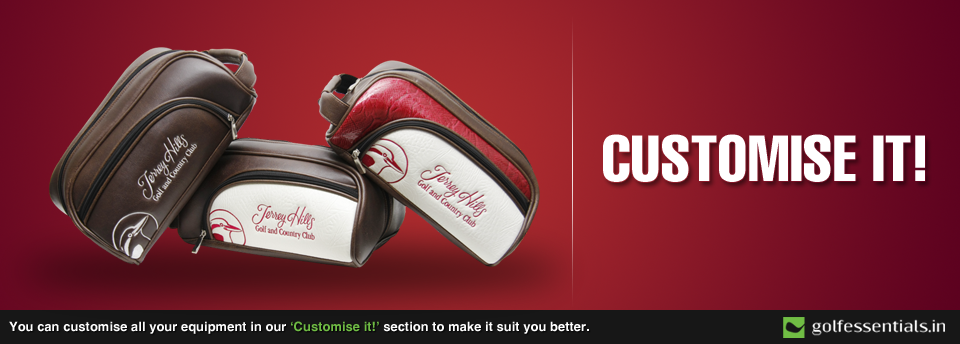
<style>
.page{position:relative;width:960px;height:344px}
.page>*{position:absolute;margin:0}
.t1{font:64px "HelveticaLT-Compressed";color:#ffffff}
.t2{font:13px "HelveticaCE-Bold";color:#ffffff}
.t3{font:13px "HelveticaCE-Bold";color:#71be45}
</style>
<div class="page">
<p class="t1" style="left:603px;top:134px;width:322px;height:48px">CUSTOMISE IT!</p>
<p class="t2" style="left:9px;top:321px;width:580px;height:13px">You can customise all your equipment in our <span class="t3">‘Customise it!’</span> section to make it suit you better.</p>
</div>
